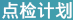
<style>
.page{position:relative;width:73px;height:20px}
.page>*{position:absolute;margin:0}
.t1{font:18px "LiHeiPro";color:#ffffff}
</style>
<div class="page">
<p class="t1" style="left:2px;top:1px;width:70px;height:18px">点检计划</p>
</div>
